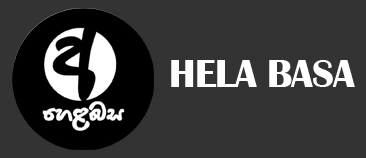
<style>
.page{position:relative;width:366px;height:158px;background:#333333}
.page>*{position:absolute;margin:0}
.t1{font:40px "BritannicBold";letter-spacing:-0.02em;color:#ffffff;text-transform:uppercase}
</style>
<div class="page">
<p class="t1" style="left:171px;top:60px;width:184px;height:27px">hELA bASA</p>
</div>
